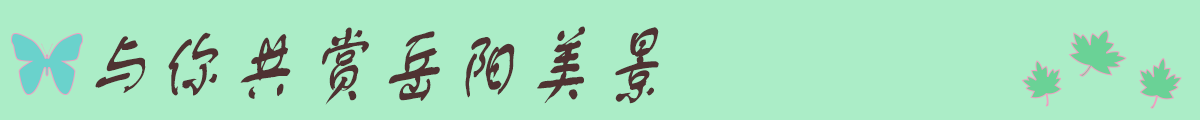
<style>
.page{position:relative;width:1200px;height:120px;background:#abedc7}
.page>*{position:absolute;margin:0}
.t1{font:89.4px "FZSTK--GBK1-0";letter-spacing:0.1em;color:#4f3232;font-style:italic;scale:0.75 1}
</style>
<div class="page">
<p class="t1" style="left:95px;top:26px;width:564px;height:79px">与你共赏岳阳美景</p>
</div>
